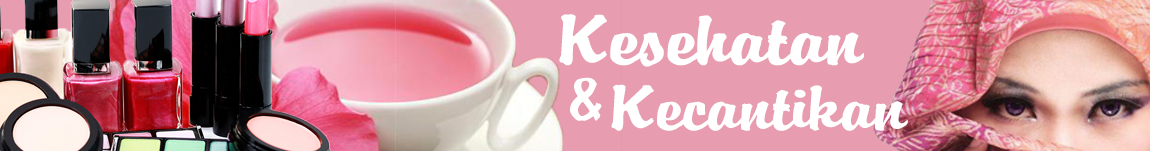
<style>
.page{position:relative;width:1150px;height:151px;background:#e89cb0}
.page>*{position:absolute;margin:0}
.t1{font:73.8px "Brandyscript";color:#ffffff;scale:1.42 1}
.t2{font:66px "Brandyscript";color:#ffffff;scale:1.16 1}
.t3{font:66.7px "Brandyscript";color:#ffffff;scale:1.41 1}
</style>
<div class="page">
<p class="t1" style="left:559px;top:14px;width:305px;height:53px">Kesehatan</p>
<p class="t2" style="left:570px;top:77px;width:32px;height:44px">&amp;</p>
<p class="t3" style="left:611px;top:84px;width:297px;height:47px">Kecantikan</p>
</div>
